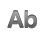
<style>
.page{position:relative;width:45px;height:40px;background:#ffffff}
.page>*{position:absolute;margin:0}
.t1{font:23.5px "HelveticaNeue-Bold"}
</style>
<div class="page">
<p class="t1" style="left:7px;top:11px;width:30px;height:18px">Ab</p>
</div>
